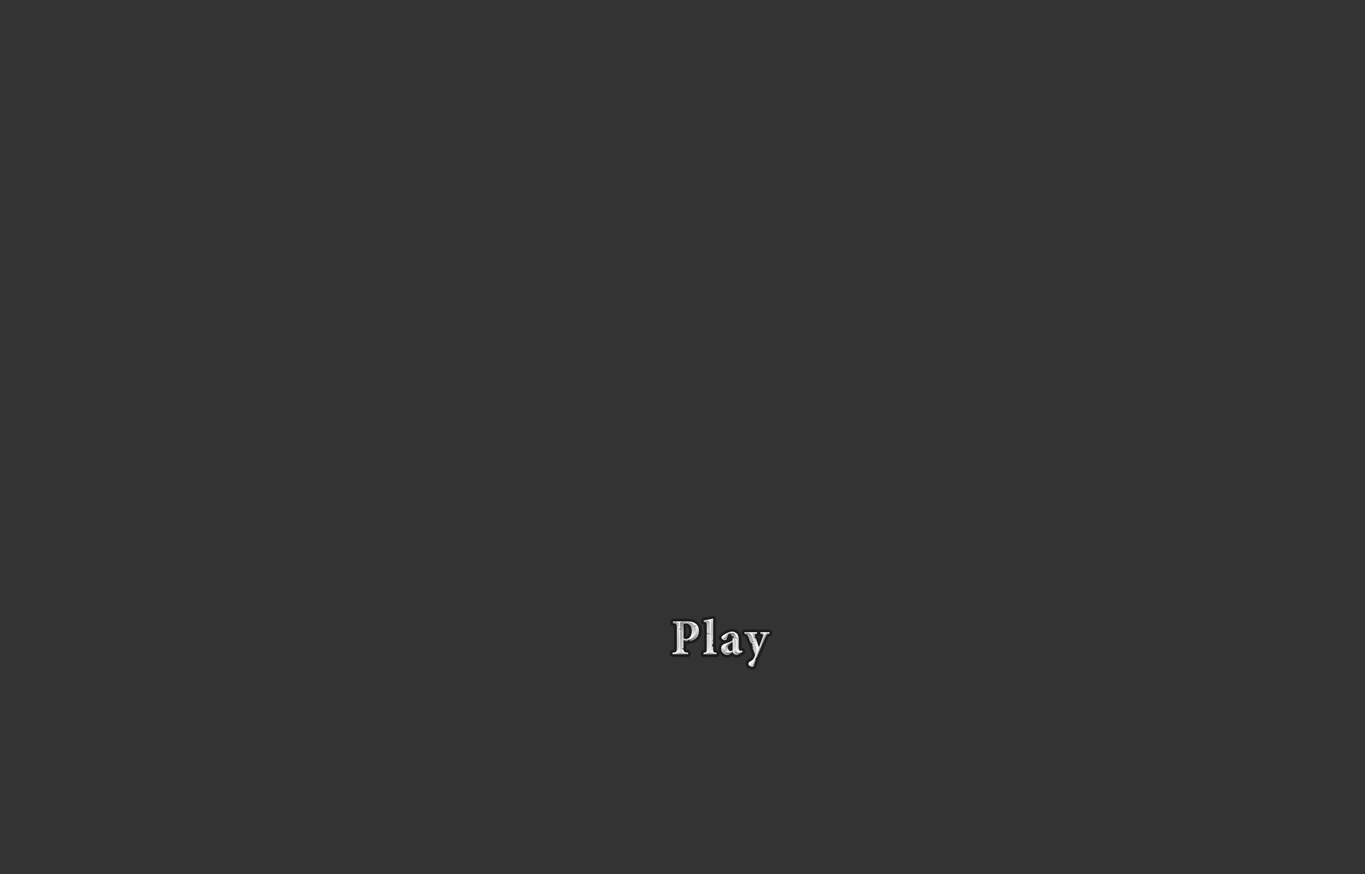
<style>
.page{position:relative;width:1365px;height:874px;background:#333333}
.page>*{position:absolute;margin:0}
.t1{font:50.6px "MinionPro-Bold";letter-spacing:0.05em}
</style>
<div class="page">
<p class="t1" style="left:672px;top:618px;width:98px;height:49px">Play</p>
</div>
